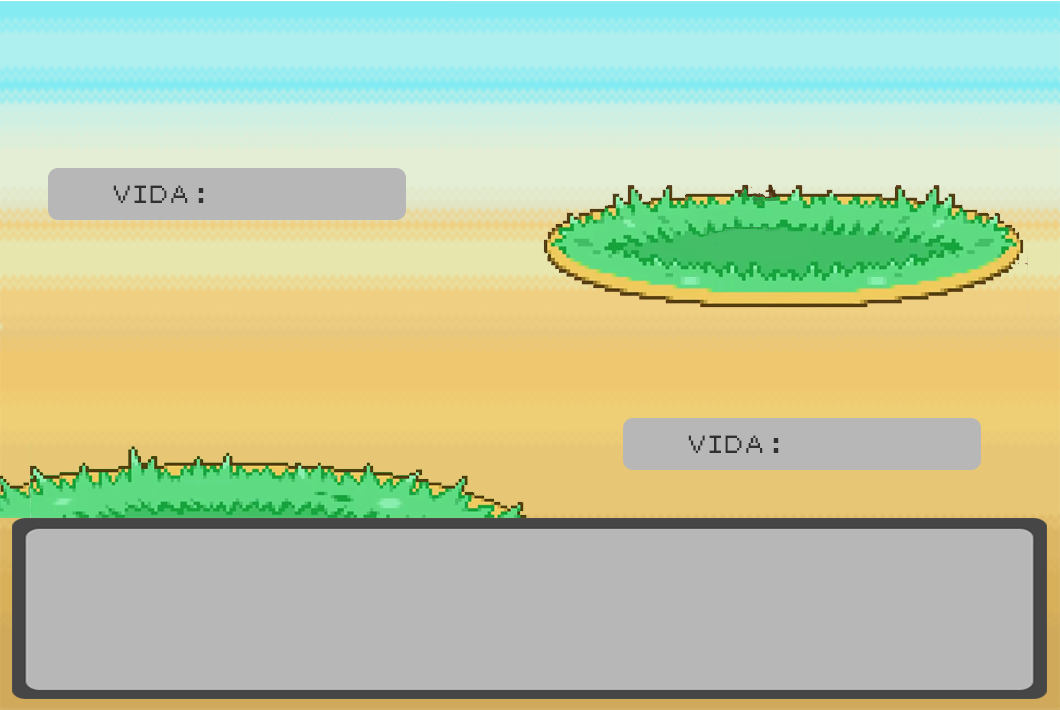
<style>
.page{position:relative;width:1060px;height:710px;background:#b7b7b7}
.page>*{position:absolute;margin:0}
.t1{font:20px "Pokemon-Classic";color:#303030;scale:0.92 1}
</style>
<div class="page">
<p class="t1" style="left:113px;top:185px;width:91px;height:18px">VIDA :</p>
<p class="t1" style="left:688px;top:435px;width:91px;height:18px">VIDA :</p>
</div>
